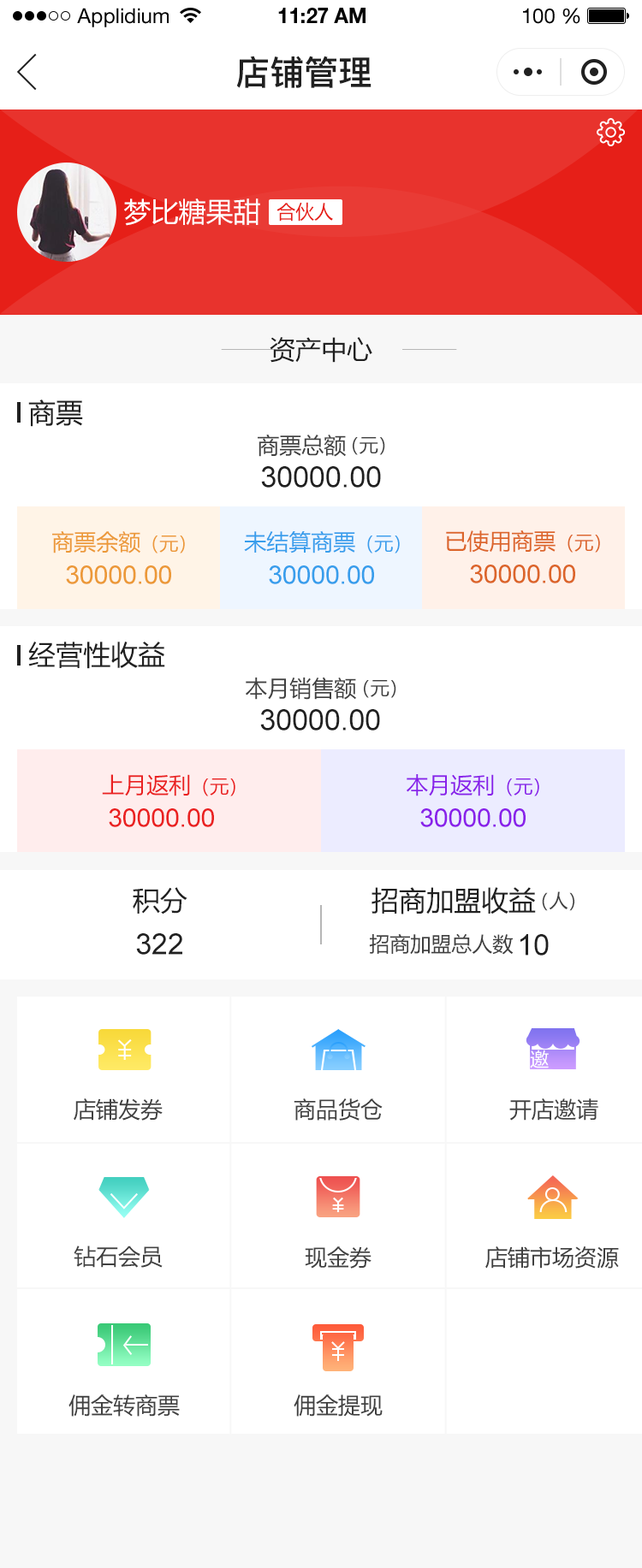
<style>
.page{position:relative;width:642px;height:1568px;background:#ffffff}
.page>*{position:absolute;margin:0}
.t1{font:20.5px "HelveticaNeueLTStd-Roman";color:#000000}
.t2{font:20.5px "HelveticaNeueLTStd-Bd";color:#000000}
.t3{font:34.2px "PingFang-SC-Bold";color:#202020;text-transform:uppercase}
.t4{font:27.4px "MicrosoftYaHei";color:#ffffff;text-transform:uppercase}
.t5{font:18.8px "MicrosoftYaHei";color:#e61f18;text-transform:uppercase}
.t6{font:25.7px "MicrosoftYaHei";color:#202020;text-transform:uppercase}
.t7{font:27.4px "MicrosoftYaHei";color:#202020;text-transform:uppercase}
.t8{font:22.2px "MicrosoftYaHei";color:#404040;text-transform:uppercase}
.t9{font:18.8px "MicrosoftYaHei";color:#404040;text-transform:uppercase}
.t10{font:29.1px "ArialMT";color:#202020;text-transform:uppercase}
.t11{font:22.2px "MicrosoftYaHei";color:#ec9938;text-transform:uppercase}
.t12{font:18.8px "MicrosoftYaHei";color:#ec9938;text-transform:uppercase}
.t13{font:22.2px "MicrosoftYaHei";color:#389eec;text-transform:uppercase}
.t14{font:18.8px "MicrosoftYaHei";color:#389eec;text-transform:uppercase}
.t15{font:22.2px "MicrosoftYaHei";color:#dc652a;text-transform:uppercase}
.t16{font:18.8px "MicrosoftYaHei";color:#dc652a;text-transform:uppercase}
.t17{font:25.7px "ArialMT";color:#ec9938;text-transform:uppercase}
.t18{font:25.7px "ArialMT";color:#389eec;text-transform:uppercase}
.t19{font:25.7px "ArialMT";color:#dc652a;text-transform:uppercase}
.t20{font:22.2px "MicrosoftYaHei";color:#ea2121;text-transform:uppercase}
.t21{font:18.8px "MicrosoftYaHei";color:#ea2121;text-transform:uppercase}
.t22{font:22.2px "MicrosoftYaHei";color:#8921ea;text-transform:uppercase}
.t23{font:18.8px "MicrosoftYaHei";color:#8921ea;text-transform:uppercase}
.t24{font:25.7px "ArialMT";color:#ea2121;text-transform:uppercase}
.t25{font:25.7px "ArialMT";color:#8921ea;text-transform:uppercase}
.t26{font:20.5px "MicrosoftYaHei";color:#404040;text-transform:uppercase}
.t27{font:18.8px "MicrosoftYaHei";color:#ffffff;text-transform:uppercase}
</style>
<div class="page">
<p class="t1" style="left:77px;top:8px;width:92px;height:19px">Applidium</p>
<p class="t2" style="left:278px;top:8px;width:87px;height:15px">11:27 AM</p>
<p class="t1" style="left:523px;top:8px;width:57px;height:16px">100 %</p>
<p class="t3" style="left:236px;top:56px;width:135px;height:32px">店铺管理</p>
<p class="t4" style="left:124px;top:198px;width:136px;height:28px">梦比糖果甜</p>
<p class="t5" style="left:276px;top:202px;width:57px;height:20px">合伙人</p>
<p class="t6" style="left:269px;top:337px;width:103px;height:26px">资产中心</p>
<p class="t7" style="left:28px;top:399px;width:55px;height:28px">商票</p>
<p class="t8" style="left:257px;top:434px;width:89px;height:23px">商票总额</p>
<p class="t9" style="left:352px;top:437px;width:33px;height:18px">（元）</p>
<p class="t10" style="left:261px;top:466px;width:120px;height:22px">30000.00</p>
<p class="t11" style="left:52px;top:530px;width:133px;height:23px">商票余额<span class="t12">（元）</span></p>
<p class="t13" style="left:244px;top:530px;width:155px;height:23px">未结算商票<span class="t14">（元）</span></p>
<p class="t15" style="left:446px;top:530px;width:154px;height:23px">已使用商票<span class="t16">（元）</span></p>
<p class="t17" style="left:66px;top:565px;width:105px;height:19px">30000.00</p>
<p class="t18" style="left:269px;top:565px;width:105px;height:19px">30000.00</p>
<p class="t19" style="left:470px;top:565px;width:105px;height:18px">30000.00</p>
<p class="t7" style="left:28px;top:642px;width:137px;height:27px">经营性收益</p>
<p class="t8" style="left:246px;top:677px;width:110px;height:23px">本月销售额</p>
<p class="t9" style="left:364px;top:680px;width:32px;height:18px">（元）</p>
<p class="t10" style="left:260px;top:709px;width:120px;height:22px">30000.00</p>
<p class="t20" style="left:102px;top:774px;width:133px;height:22px">上月返利<span class="t21">（元）</span></p>
<p class="t22" style="left:406px;top:774px;width:133px;height:22px">本月返利<span class="t23">（元）</span></p>
<p class="t24" style="left:109px;top:808px;width:105px;height:19px">30000.00</p>
<p class="t25" style="left:420px;top:808px;width:105px;height:19px">30000.00</p>
<p class="t7" style="left:133px;top:887px;width:54px;height:27px">积分</p>
<p class="t7" style="left:371px;top:887px;width:164px;height:27px">招商加盟收益</p>
<p class="t9" style="left:541px;top:891px;width:33px;height:20px">（人）</p>
<p class="t10" style="left:136px;top:933px;width:46px;height:22px">322</p>
<p class="t26" style="left:369px;top:933px;width:144px;height:22px">招商加盟总人数</p>
<p class="t10" style="left:520px;top:934px;width:28px;height:22px">10</p>
<p class="t27" style="left:530px;top:1050px;width:18px;height:18px">邀</p>
<p class="t8" style="left:74px;top:1098px;width:89px;height:23px">店铺发券</p>
<p class="t8" style="left:293px;top:1098px;width:89px;height:23px">商品货仓</p>
<p class="t8" style="left:509px;top:1098px;width:89px;height:23px">开店邀请</p>
<p class="t8" style="left:74px;top:1246px;width:89px;height:22px">钻石会员</p>
<p class="t8" style="left:305px;top:1246px;width:66px;height:23px">现金券</p>
<p class="t8" style="left:485px;top:1246px;width:133px;height:23px">店铺市场资源</p>
<p class="t8" style="left:68px;top:1394px;width:112px;height:23px">佣金转商票</p>
<p class="t8" style="left:293px;top:1394px;width:89px;height:23px">佣金提现</p>
</div>
